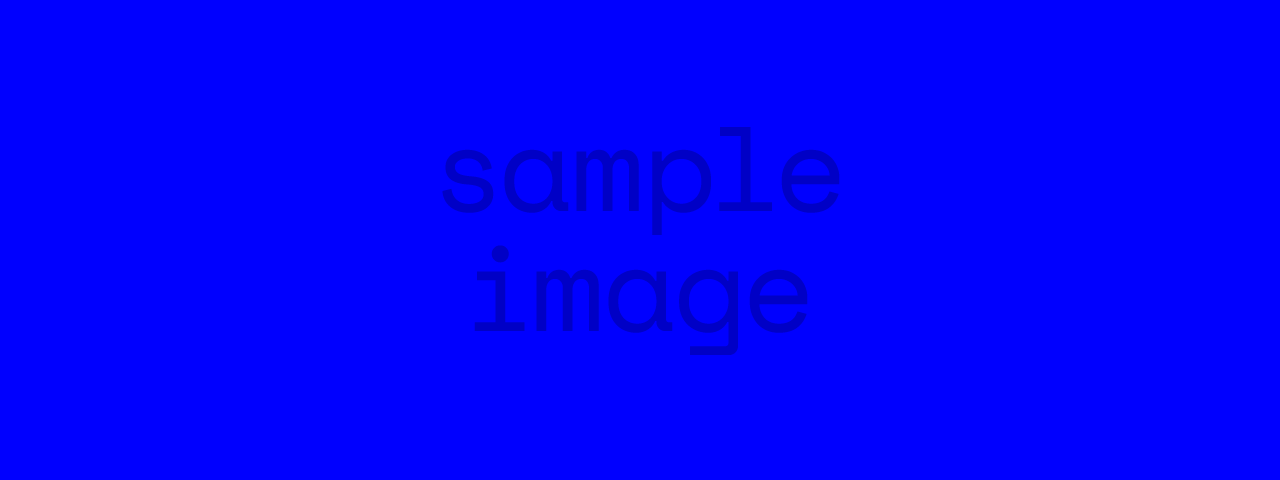
<style>
.page{position:relative;width:1280px;height:480px;background:#0000ff}
.page>*{position:absolute;margin:0}
.t1{font:119.6px/119.6px "SpaceMono-Regular";letter-spacing:-0.01em;color:#0000c6}
</style>
<div class="page">
<p class="t1" style="left:442px;top:127px;width:398px;height:228px;text-align:center">sample<br>image</p>
</div>
